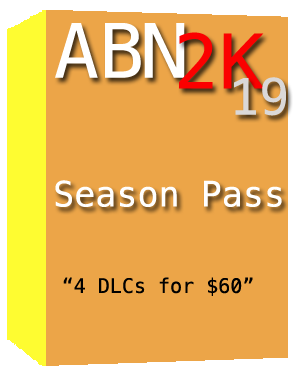
<style>
.page{position:relative;width:300px;height:375px;background:#eca548}
.page>*{position:absolute;margin:0}
.t1{font:75px "Menlo-Regular";color:#ffffff}
.t2{font:75px "Menlo-Regular";color:#fb0000}
.t3{font:50px "Menlo-Regular";color:#dad8d8}
.t4{font:35px "Menlo-Regular";color:#ffffff}
.t5{font:20px "Menlo-Regular";color:#000000}
</style>
<div class="page">
<p class="t1" style="left:55px;top:23px;width:130px;height:55px">ABN</p>
<p class="t2" style="left:179px;top:32px;width:85px;height:57px">2K</p>
<p class="t3" style="left:234px;top:77px;width:52px;height:39px">19</p>
<p class="t4" style="left:55px;top:180px;width:227px;height:27px">Season Pass</p>
<p class="t5" style="left:63px;top:277px;width:190px;height:19px">“4 DLCs for $60”</p>
</div>
